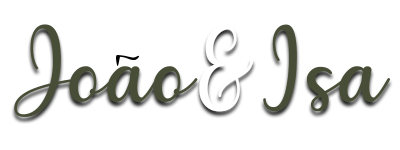
<style>
.page{position:relative;width:400px;height:150px;background:#ffffff}
.page>*{position:absolute;margin:0}
.t1{font:105.7px "HelloRegular";letter-spacing:0.001em;color:#474d36}
.t2{font:105.7px "HelloRegular";letter-spacing:0.001em;color:#ffffff}
</style>
<div class="page">
<p class="t1" style="left:14px;top:24px;width:376px;height:93px">João<span class="t2">&amp;</span>Isa</p>
</div>
